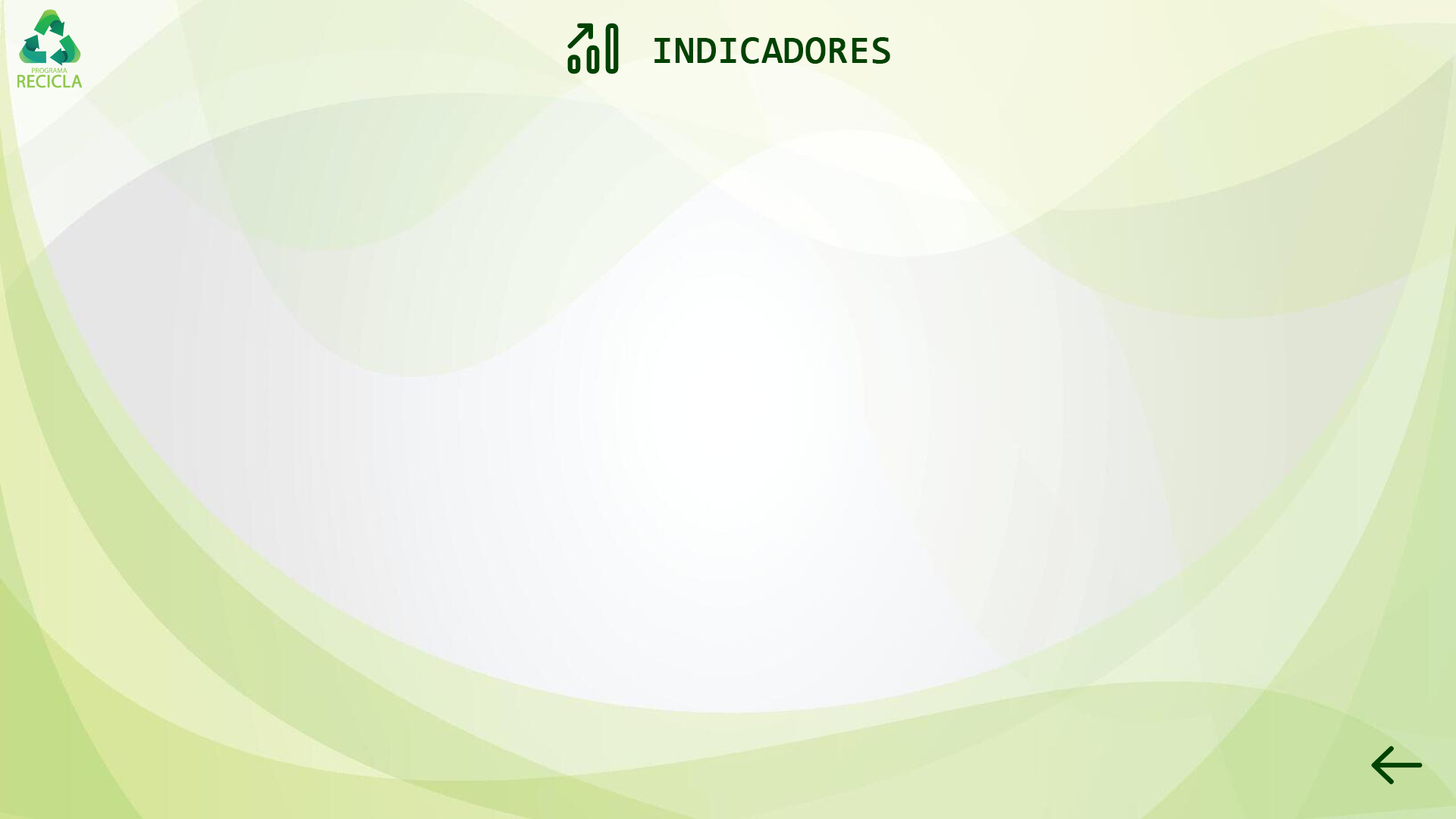
<style>
.page{position:relative;width:1456px;height:819px}
.page>*{position:absolute;margin:0}
.t1{font:37.9px "Consolas";color:#004201;font-weight:bold}
</style>
<div class="page">
<p class="t1" style="left:654px;top:37px;width:236px;height:27px">INDICADORES</p>
</div>
